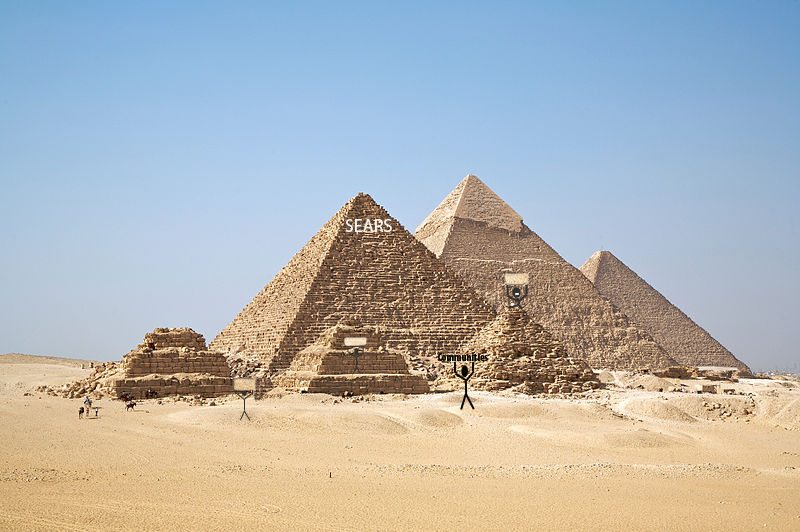
<style>
.page{position:relative;width:800px;height:532px}
.page>*{position:absolute;margin:0}
.t1{font:18px "MyriadPro-Regular";color:#f7f7f1}
.t2{font:11px "MyriadPro-BoldCond";color:#080800}
</style>
<div class="page">
<p class="t1" style="left:345px;top:219px;width:47px;height:13px">SEARS</p>
<p class="t2" style="left:438px;top:353px;width:50px;height:8px">Communities</p>
</div>
